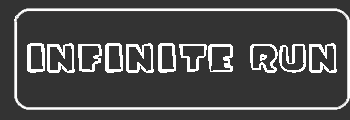
<style>
.page{position:relative;width:350px;height:120px;background:#333333}
.page>*{position:absolute;margin:0}
.t1{font:60px "iceagefont";color:#ffffff}
</style>
<div class="page">
<p class="t1" style="left:27px;top:43px;width:310px;height:30px">Infinite RUN</p>
</div>
